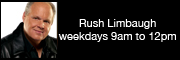
<style>
.page{position:relative;width:180px;height:60px;background:#000000}
.page>*{position:absolute;margin:0}
.t1{font:11px "HelveticaNeue";color:#ffffff}
</style>
<div class="page">
<p class="t1" style="left:58px;top:19px;width:118px;height:23px;text-align:center">Rush Limbaugh<br>weekdays 9am to 12pm</p>
</div>
